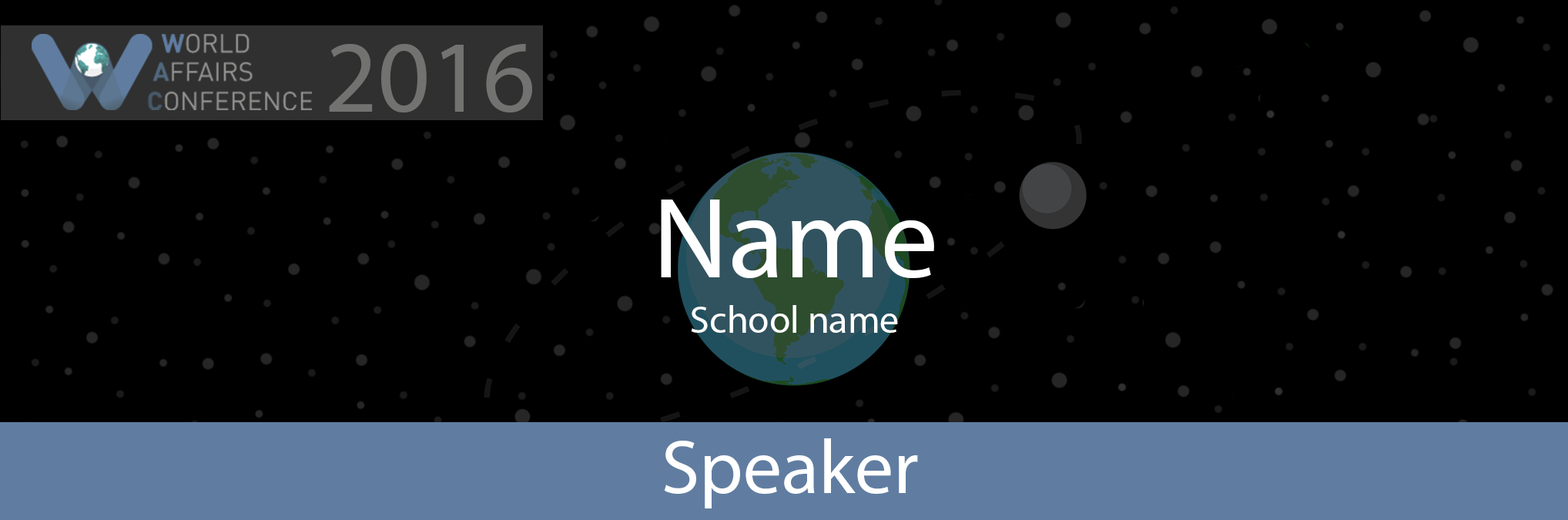
<style>
.page{position:relative;width:1568px;height:520px;background:#000000}
.page>*{position:absolute;margin:0}
.t1{font:102.7px "MyriadPro-Regular";color:#727271}
.t2{font:115.5px "MyriadPro-Regular";color:#ffffff}
.t3{font:38.5px "MyriadPro-Regular";color:#ffffff}
.t4{font:77px "MyriadPro-Regular";color:#ffffff}
</style>
<div class="page">
<p class="t1" style="left:329px;top:43px;width:203px;height:69px">2016</p>
<p class="t2" style="left:661px;top:199px;width:273px;height:79px">Name</p>
<p class="t3" style="left:691px;top:305px;width:207px;height:28px">School name</p>
<p class="t4" style="left:664px;top:438px;width:254px;height:70px">Speaker</p>
</div>
